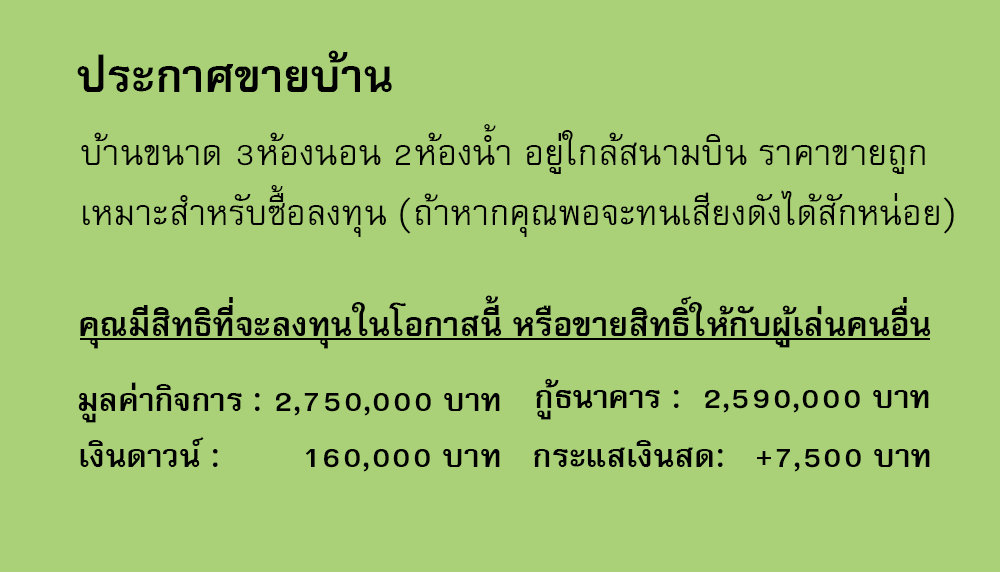
<style>
.page{position:relative;width:1000px;height:572px;background:#aad178}
.page>*{position:absolute;margin:0}
.t1{font:64px "FreesiaUPCBold";color:#000000}
.t2{font:49px/60px "FreesiaUPC";color:#000000}
.t3{font:50px/60px "FreesiaUPC";color:#000000}
.t4{font:47px "FreesiaUPCBold";color:#000000}
.t5{font:45px "FreesiaUPCBold";color:#000000}
</style>
<div class="page">
<p class="t1" style="left:77px;top:50px;width:315px;height:42px">ประกาศขายบ้าน</p>
<p class="t2" style="left:81px;top:124px;width:873px;height:113px"><span class="t3">บ้านขนาด 3ห้องนอน 2ห้องน้ำ อยู่ใกล้สนามบิน ราคาขายถูก<br></span>เหมาะสำหรับซื้อลงทุน (ถ้าหากคุณพอจะทนเสียงดังได้สักหน่อย)</p>
<p class="t4" style="left:80px;top:295px;width:851px;height:54px">คุณมีสิทธิที่จะลงทุนในโอกาสนี้ หรือขายสิทธิ์ให้กับผู้เล่นคนอื่น</p>
<p class="t5" style="left:78px;top:382px;width:422px;height:41px">มูลค่ากิจการ : 2,750,000 บาท</p>
<p class="t5" style="left:536px;top:379px;width:393px;height:41px">กู้ธนาคาร :  2,590,000 บาท</p>
<p class="t5" style="left:80px;top:436px;width:420px;height:36px">เงินดาวน์ :        160,000 บาท</p>
<p class="t5" style="left:534px;top:440px;width:396px;height:32px">กระแสเงินสด:   +7,500 บาท</p>
</div>
